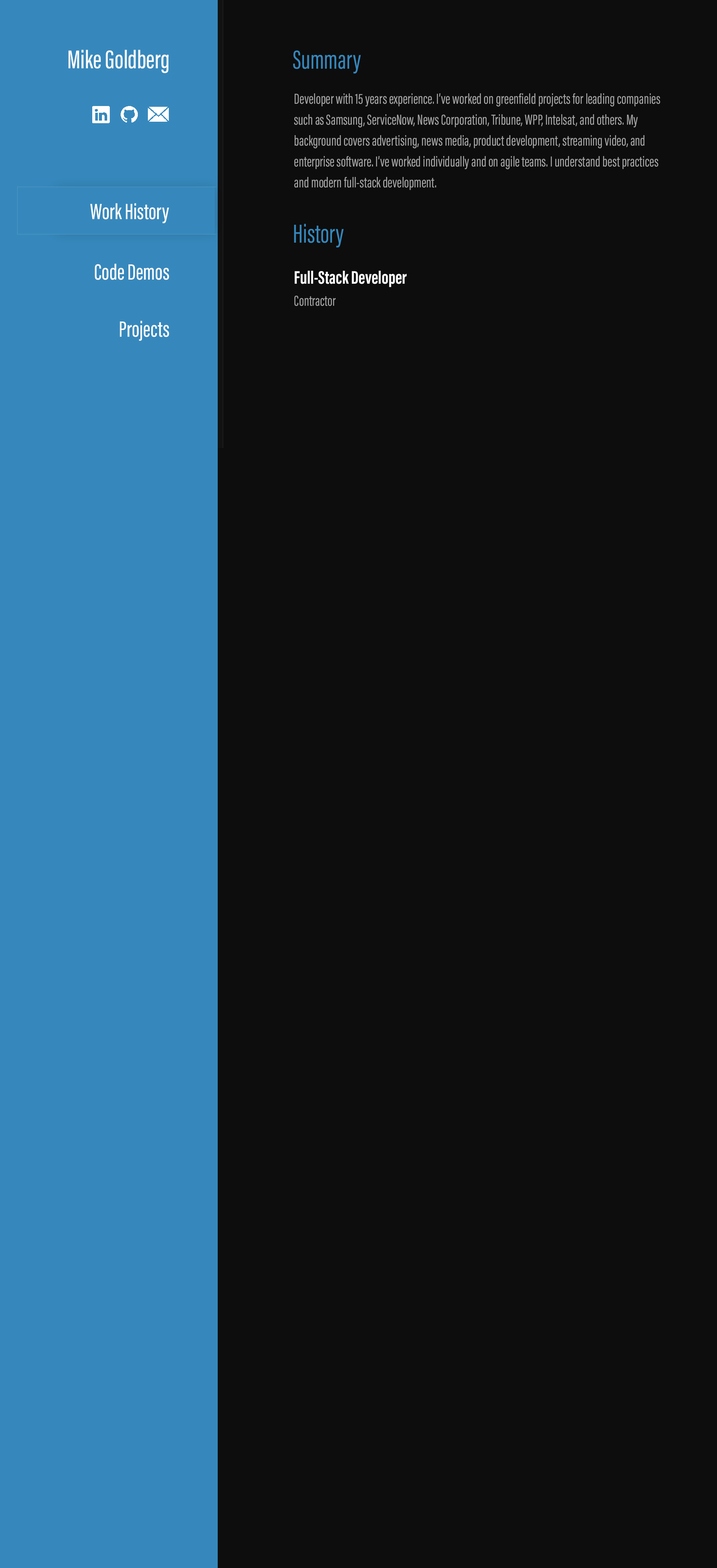
<style>
.page{position:relative;width:717px;height:1568px;background:#0d0d0d}
.page>*{position:absolute;margin:0}
.t1{font:26.5px "AcuminConcept-ExtraCondensedMedium";color:#ffffff}
.t2{font:26.9px "AcuminConcept-ExtraCondensed";color:#3688bc}
.t3{font:14.9px/20.9px "AcuminConcept-ExtraCondensed";color:#a6a6a6}
.t4{font:22.8px "AcuminConcept-ExtraCondensedMedium";color:#ffffff}
.t5{font:18.7px "AcuminConcept-ExtraCondensedBold";color:#ffffff}
.t6{font:14.9px "AcuminConcept-ExtraCondensed";color:#a6a6a6}
</style>
<div class="page">
<p class="t1" style="left:68px;top:50px;width:101px;height:23px">Mike Goldberg</p>
<p class="t2" style="left:293px;top:50px;width:68px;height:24px">Summary</p>
<p class="t3" style="left:294px;top:93px;width:366px;height:97px">Developer with 15 years experience. I’ve worked on greenfield projects for leading companies such as Samsung, ServiceNow, News Corporation, Tribune, WPP, Intelsat, and others. My background covers advertising, news media, product development, streaming video, and enterprise software. I’ve worked individually and on agile teams. I understand best practices and modern full-stack development.</p>
<p class="t4" style="left:90px;top:203px;width:79px;height:20px">Work History</p>
<p class="t2" style="left:294px;top:224px;width:49px;height:24px">History</p>
<p class="t4" style="left:95px;top:264px;width:74px;height:16px">Code Demos</p>
<p class="t5" style="left:295px;top:271px;width:112px;height:16px">Full-Stack Developer</p>
<p class="t6" style="left:294px;top:296px;width:42px;height:10px">Contractor</p>
<p class="t4" style="left:120px;top:321px;width:49px;height:20px">Projects</p>
</div>
